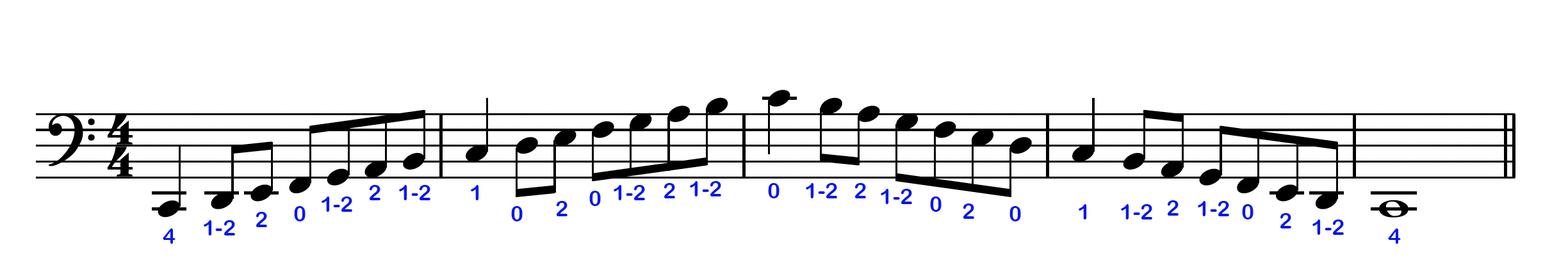
<style>
.page{position:relative;width:1568px;height:279px;background:#ffffff}
.page>*{position:absolute;margin:0}
.t1{font:21.8px "ArialRoundedMTBold";color:#0417ec}
</style>
<div class="page">
<p class="t1" style="left:369px;top:185px;width:11px;height:15px">2</p>
<p class="t1" style="left:399px;top:185px;width:31px;height:15px">1-2</p>
<p class="t1" style="left:471px;top:185px;width:8px;height:15px">1</p>
<p class="t1" style="left:614px;top:185px;width:31px;height:15px">1-2</p>
<p class="t1" style="left:664px;top:183px;width:11px;height:16px">2</p>
<p class="t1" style="left:690px;top:181px;width:31px;height:16px">1-2</p>
<p class="t1" style="left:768px;top:183px;width:12px;height:16px">0</p>
<p class="t1" style="left:806px;top:183px;width:31px;height:16px">1-2</p>
<p class="t1" style="left:854px;top:183px;width:12px;height:16px">2</p>
<p class="t1" style="left:322px;top:197px;width:30px;height:15px">1-2</p>
<p class="t1" style="left:589px;top:191px;width:12px;height:15px">0</p>
<p class="t1" style="left:881px;top:189px;width:31px;height:15px">1-2</p>
<p class="t1" style="left:930px;top:197px;width:12px;height:15px">0</p>
<p class="t1" style="left:294px;top:206px;width:12px;height:16px">0</p>
<p class="t1" style="left:511px;top:206px;width:12px;height:16px">0</p>
<p class="t1" style="left:556px;top:201px;width:12px;height:15px">2</p>
<p class="t1" style="left:963px;top:204px;width:11px;height:15px">2</p>
<p class="t1" style="left:1009px;top:206px;width:12px;height:16px">0</p>
<p class="t1" style="left:1079px;top:204px;width:8px;height:16px">1</p>
<p class="t1" style="left:1121px;top:204px;width:31px;height:16px">1-2</p>
<p class="t1" style="left:1167px;top:200px;width:12px;height:16px">2</p>
<p class="t1" style="left:1198px;top:201px;width:31px;height:15px">1-2</p>
<p class="t1" style="left:1242px;top:204px;width:12px;height:16px">0</p>
<p class="t1" style="left:204px;top:220px;width:31px;height:16px">1-2</p>
<p class="t1" style="left:256px;top:212px;width:11px;height:15px">2</p>
<p class="t1" style="left:1280px;top:213px;width:11px;height:16px">2</p>
<p class="t1" style="left:1312px;top:220px;width:32px;height:15px">1-2</p>
<p class="t1" style="left:163px;top:229px;width:13px;height:15px">4</p>
<p class="t1" style="left:1388px;top:229px;width:13px;height:15px">4</p>
</div>
